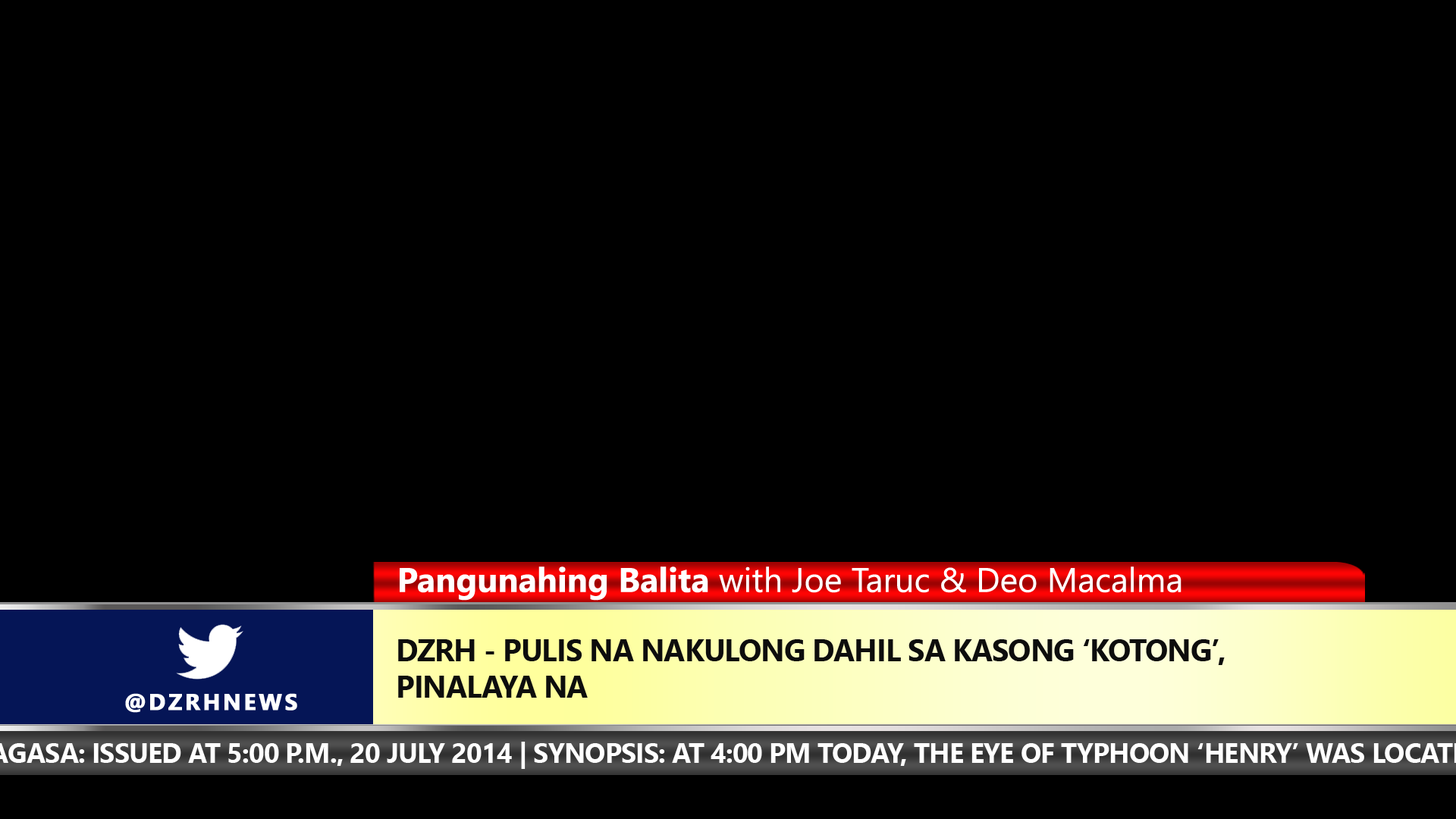
<style>
.page{position:relative;width:1456px;height:819px;background:#000000}
.page>*{position:absolute;margin:0}
.t1{font:34.1px "SegoeUI";color:#ffffff}
.t2{font:34.1px "SegoeUI-Bold";color:#ffffff}
.t3{font:30.3px/36.4px "SegoeUI-Bold";letter-spacing:-0.025em;color:#0d0d0d}
.t4{font:22.7px "SegoeUI-Bold";letter-spacing:0.1em;color:#ffffff;text-transform:uppercase;font-weight:bold}
</style>
<div class="page">
<p class="t1" style="left:400px;top:566px;width:781px;height:35px"><span class="t2">Pangunahing Balita</span> with Joe Taruc &amp; Deo Macalma</p>
<p class="t3" style="left:398px;top:639px;width:827px;height:59px">DZRH - PULIS NA NAKULONG DAHIL SA KASONG ‘KOTONG’, <br>PINALAYA NA</p>
<p class="t4" style="left:125px;top:693px;width:172px;height:20px">@dzrhnews</p>
</div>
